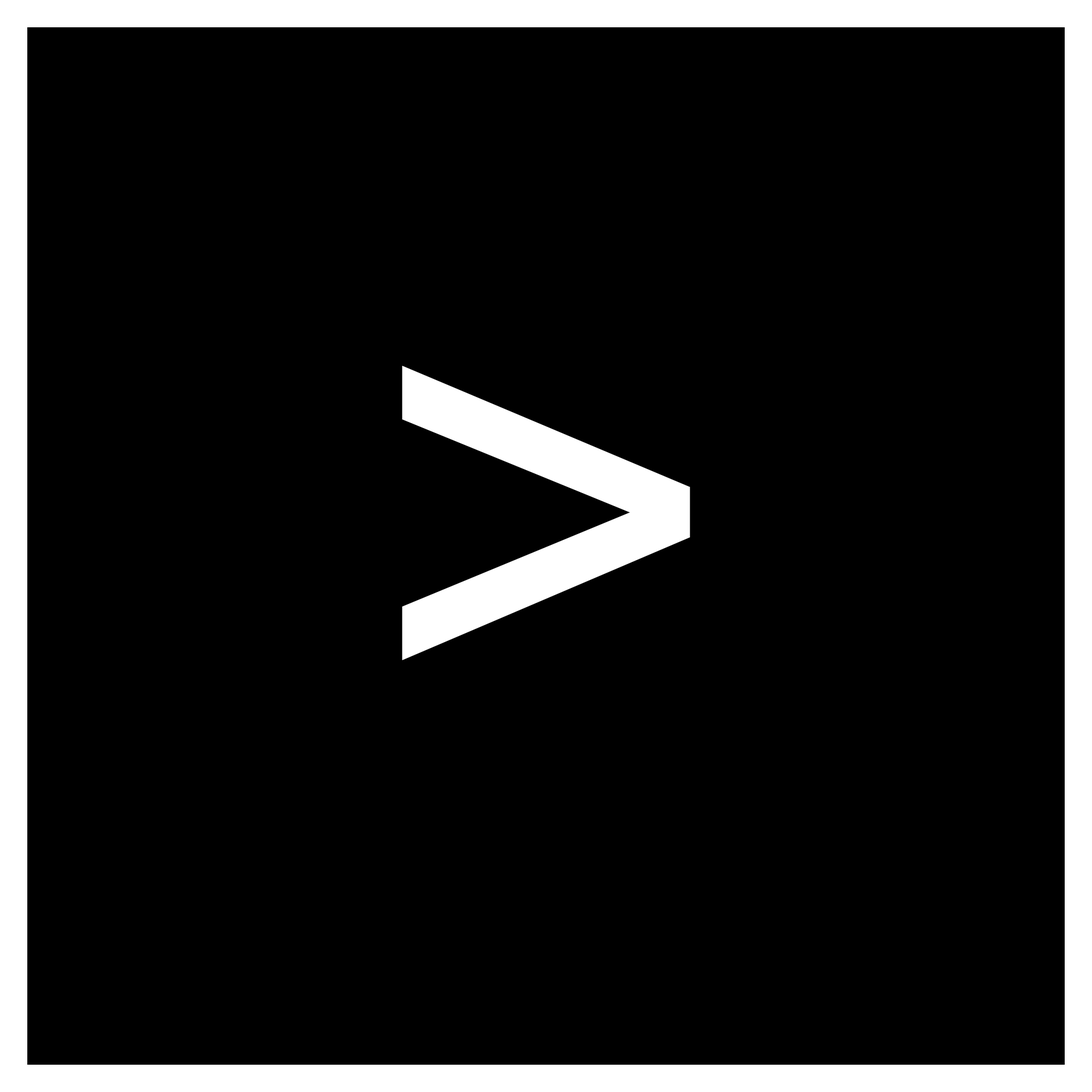
<style>
.page{position:relative;width:1092px;height:1092px;background:#000000}
.page>*{position:absolute;margin:0}
.t1{font:606.7px "ArialMT";color:#ffffff}
</style>
<div class="page">
<p class="t1" style="left:402px;top:366px;width:288px;height:294px">&gt;</p>
</div>
